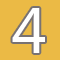
<style>
.page{position:relative;width:60px;height:60px;background:#ebba45}
.page>*{position:absolute;margin:0}
.t1{font:60px "MicrosoftYaHei";color:#ffffff}
</style>
<div class="page">
<p class="t1" style="left:12px;top:8px;width:33px;height:45px">4</p>
</div>
